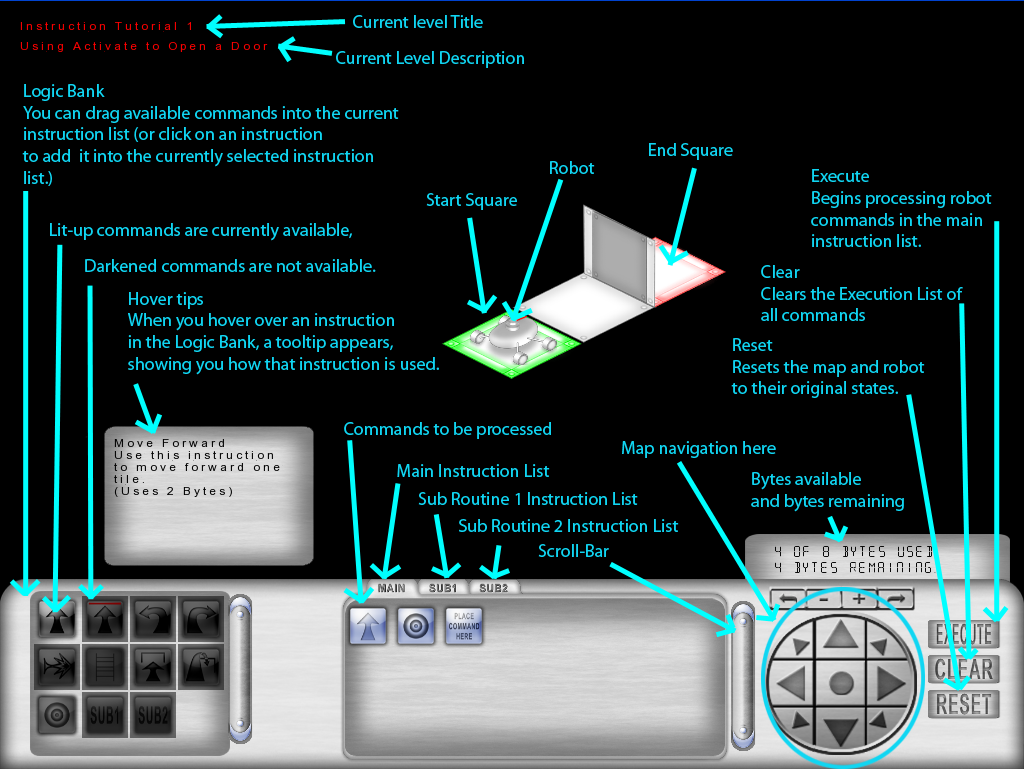
<style>
.page{position:relative;width:1024px;height:769px;background:#000000}
.page>*{position:absolute;margin:0}
.t1{font:18px "MyriadPro-Regular";color:#10d5f2}
</style>
<div class="page">
<p class="t1" style="left:353px;top:15px;width:130px;height:13px">Current level Title</p>
<p class="t1" style="left:336px;top:51px;width:188px;height:17px">Current Level Description</p>
<p class="t1" style="left:22px;top:84px;width:377px;height:102px">Logic Bank<br>You can drag available commands into the current<br>instruction list (or click on an instruction<br>to add  it into the currently selected instruction <br>list.)</p>
<p class="t1" style="left:649px;top:143px;width:84px;height:17px">End Square</p>
<p class="t1" style="left:550px;top:161px;width:45px;height:13px">Robot</p>
<p class="t1" style="left:811px;top:169px;width:181px;height:78px">Execute<br>Begins processing robot<br>commands in the main<br>instruction list.</p>
<p class="t1" style="left:426px;top:193px;width:91px;height:17px">Start Square</p>
<p class="t1" style="left:50px;top:223px;width:302px;height:18px">Lit-up commands are currently available,</p>
<p class="t1" style="left:85px;top:259px;width:291px;height:13px">Darkened commands are not available.</p>
<p class="t1" style="left:761px;top:265px;width:202px;height:56px">Clear<br>Clears the Execution List of<br>all commands</p>
<p class="t1" style="left:128px;top:292px;width:311px;height:83px">Hover tips<br>When you hover over an instruction <br>in the Logic Bank, a tooltip appears, <br>showing you how that instruction is used.</p>
<p class="t1" style="left:731px;top:338px;width:194px;height:60px">Reset<br>Resets the map and robot<br>to their original states.</p>
<p class="t1" style="left:344px;top:422px;width:207px;height:17px">Commands to be processed</p>
<p class="t1" style="left:622px;top:441px;width:154px;height:17px">Map navigation here</p>
<p class="t1" style="left:397px;top:464px;width:153px;height:13px">Main Instruction List</p>
<p class="t1" style="left:751px;top:472px;width:153px;height:40px">Bytes available<br>and bytes remaining</p>
<p class="t1" style="left:418px;top:492px;width:220px;height:13px">Sub Routine 1 Instruction List</p>
<p class="t1" style="left:459px;top:519px;width:220px;height:13px">Sub Routine 2 Instruction List</p>
<p class="t1" style="left:538px;top:544px;width:71px;height:13px">Scroll-Bar</p>
</div>
